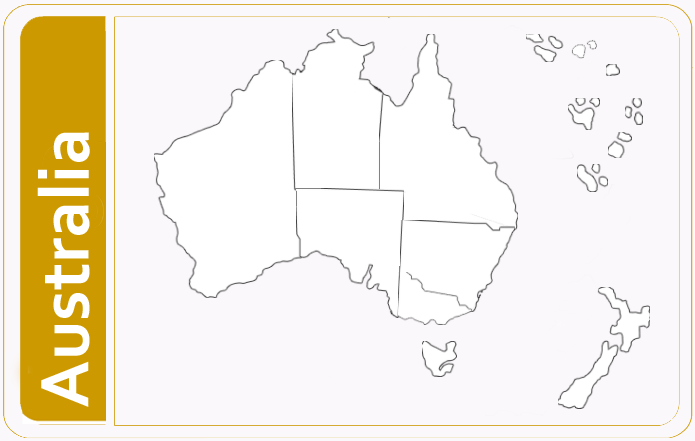
<style>
.page{position:relative;width:695px;height:441px;background:#fbf8fb}
.page>*{position:absolute;margin:0}
.t1{font:72px "Corbel-Bold";color:#ffffff}
</style>
<div class="page">
<p class="t1" style="left:37px;top:132px;width:53px;height:275px;rotate:-90deg">Australia</p>
</div>
